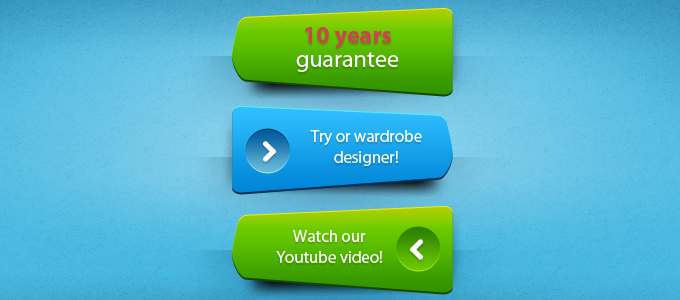
<style>
.page{position:relative;width:680px;height:300px}
.page>*{position:absolute;margin:0}
.t1{font:24px/24px "MyriadPro-Regular";color:#ffffff}
.t2{font:24px/24px "MyriadPro-Bold";color:#cd4353}
.t3{font:16.8px "MyriadPro-Regular";color:#ffffff}
</style>
<div class="page">
<p class="t1" style="left:296px;top:27px;width:103px;height:45px;text-align:center"><span class="t2">10 years</span> <br>guarantee</p>
<p class="t3" style="left:310px;top:130px;width:112px;height:36px;text-align:center">Try or wardrobe designer!</p>
<p class="t3" style="left:276px;top:230px;width:106px;height:33px;text-align:center">Watch our Youtube video!</p>
</div>
